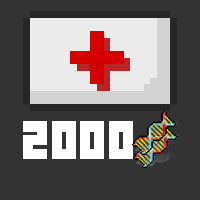
<style>
.page{position:relative;width:200px;height:200px;background:#333333}
.page>*{position:absolute;margin:0}
.t1{font:48px "04b19";letter-spacing:0.025em;color:#ffffff}
</style>
<div class="page">
<p class="t1" style="left:23px;top:121px;width:110px;height:38px">2000</p>
</div>
